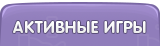
<style>
.page{position:relative;width:160px;height:46px;background:#907dbb}
.page>*{position:absolute;margin:0}
.t1{font:16px "RotondaC-Bold";letter-spacing:0.04em;color:#ffffff;text-transform:uppercase}
</style>
<div class="page">
<p class="t1" style="left:13px;top:21px;width:133px;height:12px">активные игры</p>
</div>
